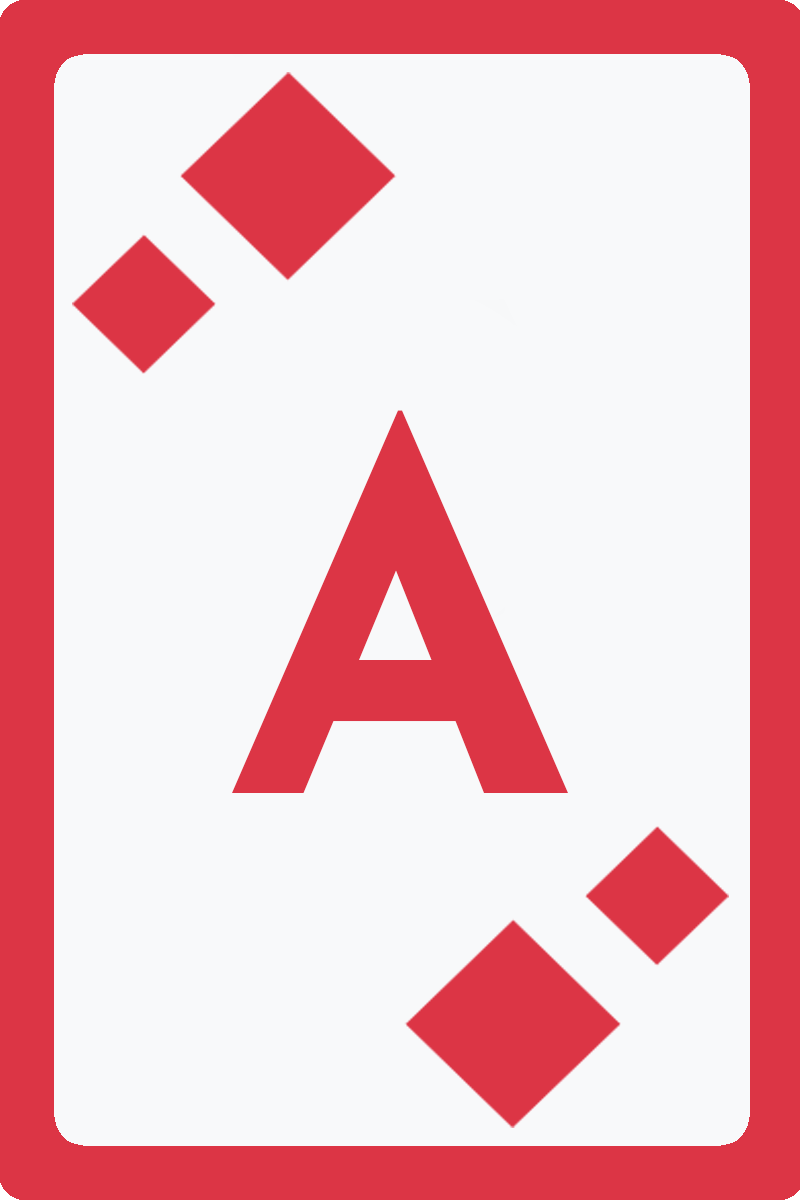
<style>
.page{position:relative;width:800px;height:1200px;background:#f8f9fa}
.page>*{position:absolute;margin:0}
.t1{font:500px "JosefinSans-Bold";color:#dc3545}
</style>
<div class="page">
<p class="t1" style="left:232px;top:410px;width:336px;height:383px">A</p>
</div>
